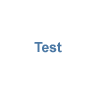
<style>
.page{position:relative;width:100px;height:100px;background:#ffffff}
.page>*{position:absolute;margin:0}
.t1{font:14px "Arial-BoldMT";color:#4c79a5}
</style>
<div class="page">
<p class="t1" style="left:34px;top:42px;width:28px;height:11px">Test</p>
</div>
